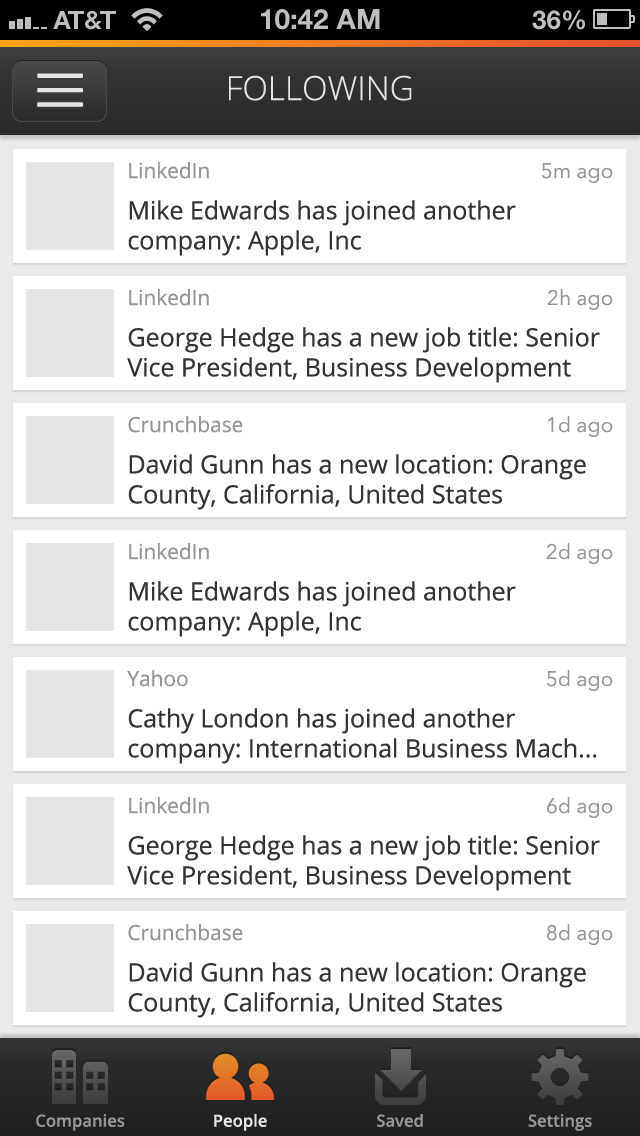
<style>
.page{position:relative;width:640px;height:1136px;background:#ffffff}
.page>*{position:absolute;margin:0}
.t1{font:33.3px "OpenSans-Light";color:#e5e5e5}
.t2{font:25px "OpenSans";color:#343434}
.t3{font:20.8px "OpenSans";color:#969696}
.t4{font:20.8px "AvenirNext-Regular";color:#969696}
.t5{font:16.7px "OpenSans-Semibold";color:#969696}
.t6{font:16.7px "OpenSans-Semibold";color:#e5e5e5}
</style>
<div class="page">
<p class="t1" style="left:229px;top:75px;width:183px;height:26px">FOLLOWING</p>
<p class="t2" style="left:128px;top:162px;width:388px;height:94px"><span class="t3">LinkedIn<br></span>Mike Edwards has joined another company: Apple, Inc</p>
<p class="t4" style="left:541px;top:163px;width:72px;height:20px">5m ago</p>
<p class="t2" style="left:127px;top:289px;width:473px;height:94px"><span class="t3">LinkedIn<br></span>George Hedge has a new job title: Senior Vice President, Business Development</p>
<p class="t4" style="left:547px;top:289px;width:66px;height:21px">2h ago</p>
<p class="t2" style="left:128px;top:416px;width:458px;height:94px"><span class="t3">Crunchbase<br></span>David Gunn has a new location: Orange County, California, United States</p>
<p class="t4" style="left:548px;top:416px;width:65px;height:21px">1d ago</p>
<p class="t2" style="left:128px;top:543px;width:388px;height:94px"><span class="t3">LinkedIn<br></span>Mike Edwards has joined another company: Apple, Inc</p>
<p class="t4" style="left:546px;top:543px;width:67px;height:21px">2d ago</p>
<p class="t2" style="left:127px;top:670px;width:470px;height:94px"><span class="t3">Yahoo<br></span>Cathy London has joined another company: International Business Mach...</p>
<p class="t4" style="left:546px;top:670px;width:67px;height:21px">5d ago</p>
<p class="t2" style="left:127px;top:797px;width:473px;height:94px"><span class="t3">LinkedIn<br></span>George Hedge has a new job title: Senior Vice President, Business Development</p>
<p class="t4" style="left:547px;top:797px;width:66px;height:21px">6d ago</p>
<p class="t2" style="left:128px;top:924px;width:458px;height:94px"><span class="t3">Crunchbase<br></span>David Gunn has a new location: Orange County, California, United States</p>
<p class="t4" style="left:547px;top:924px;width:66px;height:21px">8d ago</p>
<p class="t5" style="left:36px;top:1114px;width:89px;height:17px">Companies</p>
<p class="t6" style="left:214px;top:1114px;width:53px;height:17px">People</p>
<p class="t5" style="left:377px;top:1114px;width:46px;height:13px">Saved</p>
<p class="t5" style="left:528px;top:1114px;width:64px;height:17px">Settings</p>
</div>
